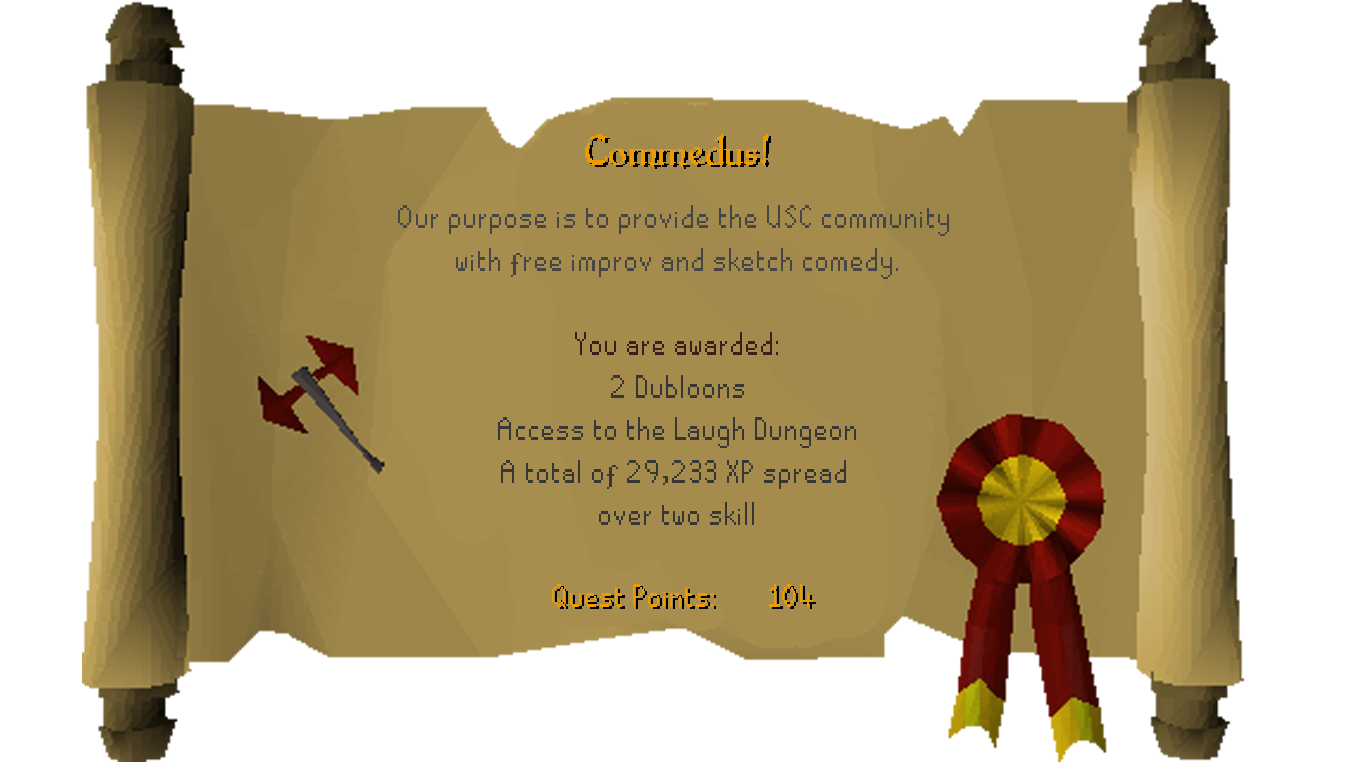
<style>
.page{position:relative;width:1366px;height:768px;background:#ffffff}
.page>*{position:absolute;margin:0}
.t1{font:59.4px "RuneScape-Large";color:#ec9b00}
.t2{font:35.4px "RuneScape-Chat";color:#373737}
.t3{font:35.4px "RuneScape-Chat";color:#464646}
.t4{font:35.4px "RuneScape-Chat";color:#401d1d}
.t5{font:35.4px "RuneScape-Chat";color:#ec9b00}
</style>
<div class="page">
<p class="t1" style="left:585px;top:134px;width:183px;height:33px">Commedus!</p>
<p class="t2" style="left:398px;top:205px;width:551px;height:320px;text-align:center"><span class="t3">Our purpose is to provide the USC community <br>with free improv and sketch comedy.<br><br></span><span class="t4">You are awarded:<br></span>2 Dubloons<br>Access to the Laugh Dungeon<br>A total of 29,233 XP spread <br>over two skill</p>
<p class="t5" style="left:552px;top:584px;width:261px;height:23px">Quest Points:  104</p>
</div>
